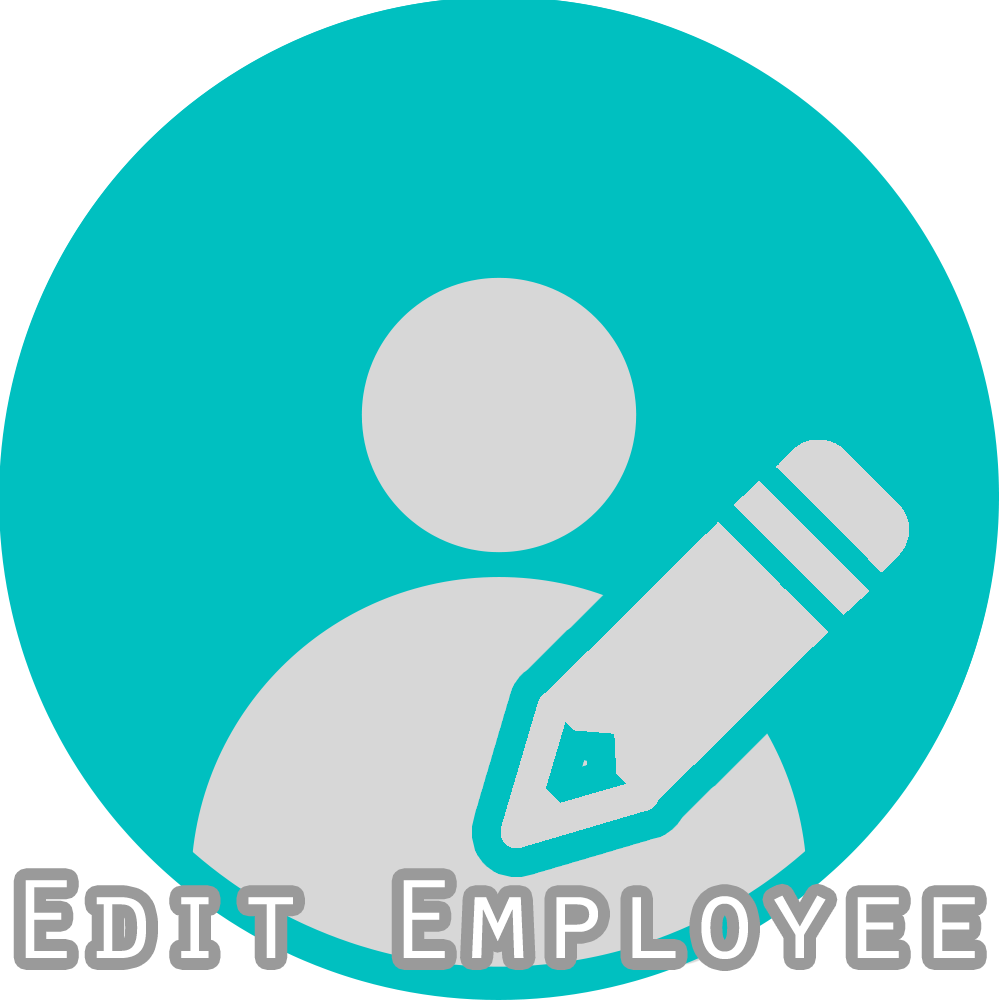
<style>
.page{position:relative;width:1000px;height:1000px;background:#00c0c0}
.page>*{position:absolute;margin:0}
.t1{font:116.7px "OratorStd";color:#ffffff;scale:1.08 1}
</style>
<div class="page">
<p class="t1" style="left:25px;top:880px;width:950px;height:79px">Edit Employee</p>
</div>
